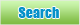
<style>
.page{position:relative;width:80px;height:25px}
.page>*{position:absolute;margin:0}
.t1{font:14px "Impact";color:#0592ca}
</style>
<div class="page">
<p class="t1" style="left:18px;top:7px;width:41px;height:11px">Search</p>
</div>
